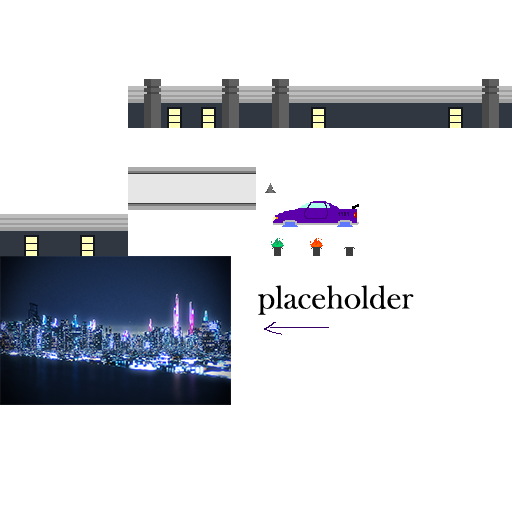
<style>
.page{position:relative;width:512px;height:512px;background:#ffffff}
.page>*{position:absolute;margin:0}
.t1{font:33.3px "BaskOldFace";color:#000000}
</style>
<div class="page">
<p class="t1" style="left:258px;top:285px;width:156px;height:30px">placeholder</p>
</div>
